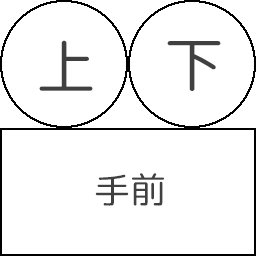
<style>
.page{position:relative;width:256px;height:256px;background:#ffffff}
.page>*{position:absolute;margin:0}
.t1{font:60px "rounded-mplus-1m-regular";color:#404040}
.t2{font:36px "rounded-mplus-1m-regular";color:#404040}
</style>
<div class="page">
<p class="t1" style="left:39px;top:40px;width:54px;height:51px">上</p>
<p class="t1" style="left:167px;top:41px;width:54px;height:50px">下</p>
<p class="t2" style="left:95px;top:173px;width:69px;height:33px">手前</p>
</div>
